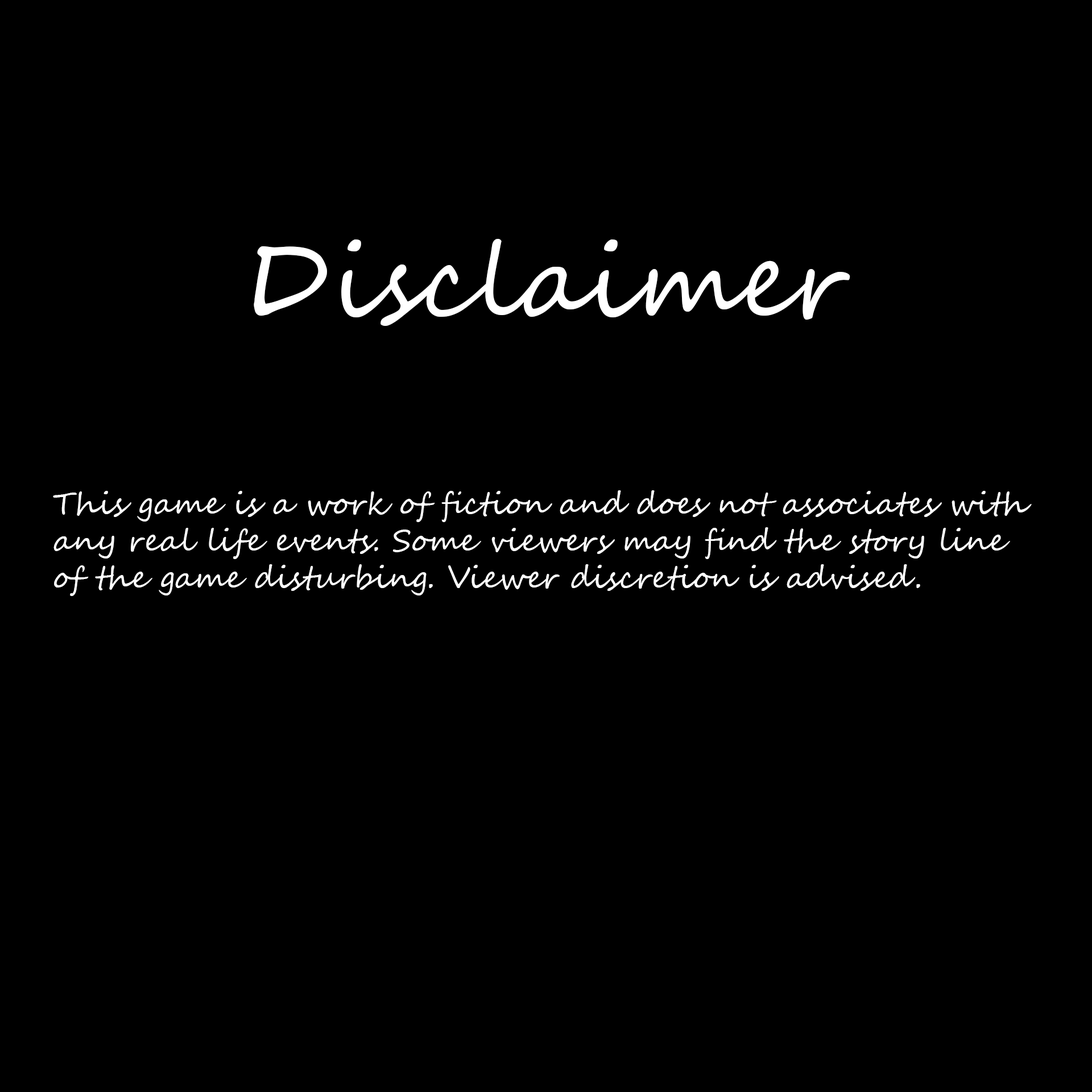
<style>
.page{position:relative;width:1092px;height:1092px;background:#000000}
.page>*{position:absolute;margin:0}
.t1{font:102.4px "SegoeScript";color:#ffffff}
.t2{font:30.7px "SegoeScript";color:#ffffff}
</style>
<div class="page">
<p class="t1" style="left:254px;top:239px;width:596px;height:87px">Disclaimer</p>
<p class="t2" style="left:53px;top:490px;width:979px;height:106px">This game is a work of fiction and does not associates with <br>any real life events. Some viewers may find the story line <br>of the game disturbing. Viewer discretion is advised.</p>
</div>
